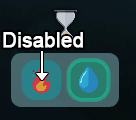
<style>
.page{position:relative;width:136px;height:120px}
.page>*{position:absolute;margin:0}
.t1{font:20px "ArialMT";color:#ffffff;font-weight:bold}
</style>
<div class="page">
<p class="t1" style="left:3px;top:32px;width:80px;height:16px">Disabled</p>
</div>
